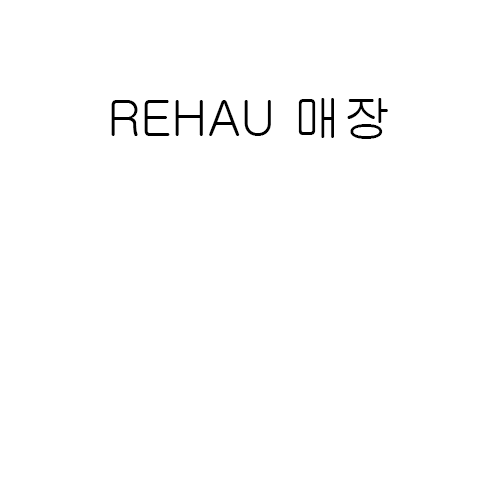
<style>
.page{position:relative;width:500px;height:500px;background:#ffffff}
.page>*{position:absolute;margin:0}
.t1{font:50px "Gulim";color:#000000}
</style>
<div class="page">
<p class="t1" style="left:111px;top:98px;width:277px;height:41px">REHAU 매장</p>
</div>
